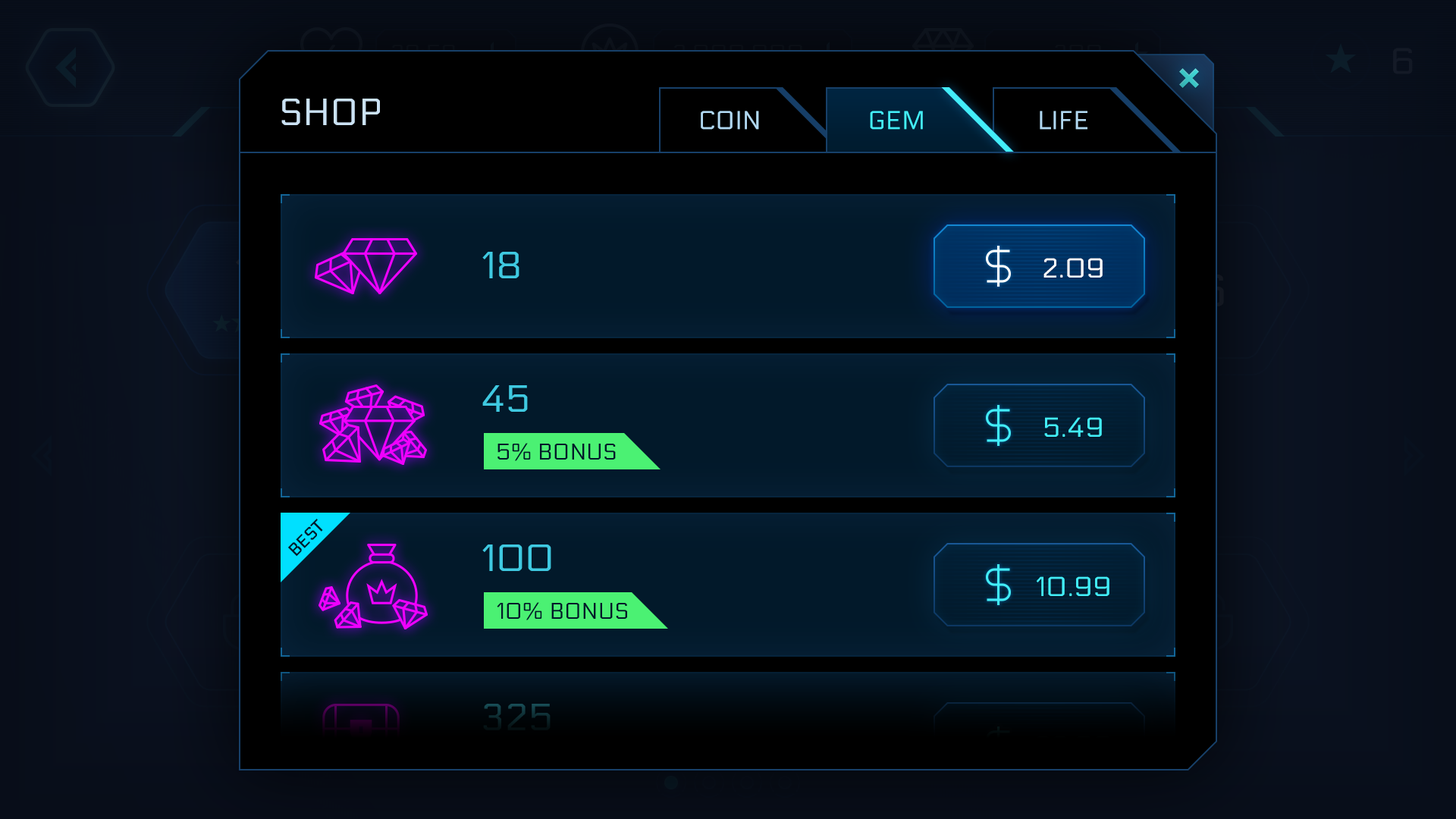
<style>
.page{position:relative;width:1456px;height:819px}
.page>*{position:absolute;margin:0}
.t1{font:37.9px "Electrolize-Regular";color:#cbe2f4;text-transform:uppercase}
.t2{font:25.8px "Electrolize-Regular";color:#b1d8f1;text-transform:uppercase}
.t3{font:25.8px "Electrolize-Regular";color:#43edf8;text-transform:uppercase}
.t4{font:37.9px "Electrolize-Regular";color:#3fc9e1;text-transform:uppercase}
.t5{font:27.3px "Electrolize-Regular";color:#ffffff;text-transform:uppercase}
.t6{font:27.3px "Electrolize-Regular";color:#42edf8;text-transform:uppercase}
.t7{font:22.7px "Electrolize-Regular";color:#02192a;text-transform:uppercase}
.t8{font:16.7px "Electrolize-Regular";color:#021a2b;text-transform:uppercase;font-weight:bold}
.t9{font:37.9px "Electrolize-Regular";text-transform:uppercase}
</style>
<div class="page">
<p class="t1" style="left:281px;top:99px;width:99px;height:26px">SHOP</p>
<p class="t2" style="left:701px;top:111px;width:58px;height:19px">coin</p>
<p class="t3" style="left:870px;top:111px;width:53px;height:19px">Gem</p>
<p class="t3" style="left:870px;top:111px;width:53px;height:19px">GEM</p>
<p class="t2" style="left:1040px;top:111px;width:47px;height:19px">life</p>
<p class="t4" style="left:482px;top:252px;width:37px;height:26px">18</p>
<p class="t5" style="left:1043px;top:258px;width:60px;height:20px">2.09</p>
<p class="t5" style="left:1043px;top:258px;width:60px;height:20px">2.09</p>
<p class="t4" style="left:482px;top:385px;width:46px;height:27px">45</p>
<p class="t6" style="left:1044px;top:417px;width:58px;height:20px">5.49</p>
<p class="t7" style="left:497px;top:443px;width:119px;height:18px">5% Bonus</p>
<p class="t8" style="left:288px;top:519px;width:35px;height:38px;rotate:-45deg">BEST</p>
<p class="t4" style="left:482px;top:544px;width:69px;height:27px">100</p>
<p class="t6" style="left:1036px;top:576px;width:73px;height:20px">10.99</p>
<p class="t7" style="left:497px;top:602px;width:130px;height:18px">10% Bonus</p>
<p class="t9" style="left:483px;top:704px;width:68px;height:26px">325</p>
</div>
